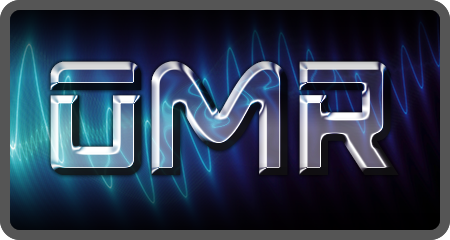
<style>
.page{position:relative;width:450px;height:240px}
.page>*{position:absolute;margin:0}
.t1{font:180px "ARDESTINE"}
</style>
<div class="page">
<p class="t1" style="left:50px;top:61px;width:349px;height:114px">OMR</p>
</div>
